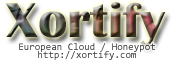
<style>
.page{position:relative;width:175px;height:60px;background:#ffffff}
.page>*{position:absolute;margin:0}
.t1{font:50.8px "BritannicBold";scale:1.07 1}
.t2{font:10px/8px "Consolas";color:#383838}
</style>
<div class="page">
<p class="t1" style="left:5px;top:2px;width:161px;height:44px">Xortify</p>
<p class="t2" style="left:19px;top:43px;width:136px;height:17px;text-align:center">European Cloud / Honeypot<br>http://xortify.com</p>
</div>
